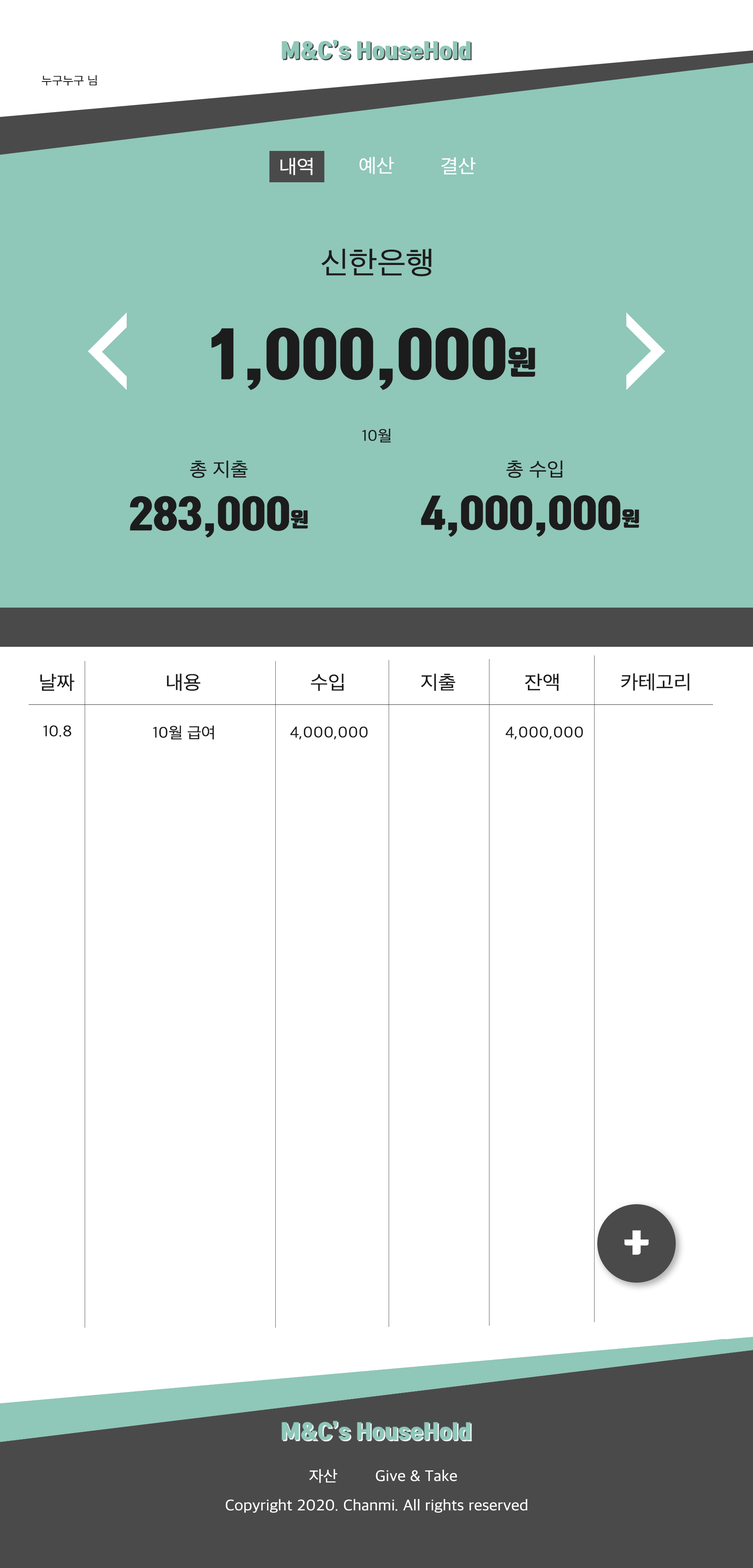
<style>
.page{position:relative;width:753px;height:1568px;background:#ffffff}
.page>*{position:absolute;margin:0}
.t1{font:11.8px "AppleSDGothicNeo-Regular";color:#1c1c1c;scale:1.05 1}
.t2{font:19.6px "AppleSDGothicNeo-Regular";color:#ffffff;scale:1.05 1}
.t3{font:31.4px "AppleSDGothicNeo-Regular";color:#1c1c1c;scale:1.05 1}
.t4{font:58.8px "TmonMonsoriOTFBlack";color:#1c1c1c;scale:1.05 1}
.t5{font:31.4px "TmonMonsoriOTFBlack";color:#1c1c1c;scale:1.05 1}
.t6{font:15.7px "AppleSDGothicNeo-Regular";color:#1c1c1c;scale:1.05 1}
.t7{font:19.6px "AppleSDGothicNeo-Regular";color:#1c1c1c;scale:1.05 1}
.t8{font:39.2px "TmonMonsoriOTFBlack";color:#1c1c1c;scale:1.05 1}
.t9{font:19.6px "TmonMonsoriOTFBlack";color:#1c1c1c;scale:1.05 1}
.t10{font:15.7px "AppleSDGothicNeo-Regular";color:#ffffff;scale:1.05 1}
</style>
<div class="page">
<p class="t1" style="left:42px;top:75px;width:55px;height:11px">누구누구 님</p>
<p class="t2" style="left:280px;top:158px;width:32px;height:17px">내역</p>
<p class="t2" style="left:359px;top:157px;width:35px;height:17px">예산</p>
<p class="t2" style="left:441px;top:157px;width:34px;height:17px">결산</p>
<p class="t3" style="left:321px;top:249px;width:110px;height:27px">신한은행</p>
<p class="t4" style="left:211px;top:328px;width:324px;height:62px">1,000,000<span class="t5">원</span></p>
<p class="t6" style="left:362px;top:428px;width:29px;height:15px">10월</p>
<p class="t7" style="left:190px;top:461px;width:57px;height:17px">총 지출</p>
<p class="t7" style="left:506px;top:460px;width:56px;height:18px">총 수입</p>
<p class="t8" style="left:130px;top:496px;width:178px;height:42px">283,000<span class="t9">원</span></p>
<p class="t8" style="left:421px;top:495px;width:218px;height:42px">4,000,000<span class="t9">원</span></p>
<p class="t7" style="left:40px;top:673px;width:34px;height:18px">날짜</p>
<p class="t7" style="left:167px;top:673px;width:33px;height:18px">내용</p>
<p class="t7" style="left:310px;top:673px;width:33px;height:18px">수입</p>
<p class="t7" style="left:421px;top:673px;width:34px;height:18px">지출</p>
<p class="t7" style="left:524px;top:673px;width:34px;height:18px">잔액</p>
<p class="t7" style="left:621px;top:673px;width:68px;height:18px">카테고리</p>
<p class="t6" style="left:43px;top:725px;width:28px;height:12px">10.８</p>
<p class="t6" style="left:153px;top:726px;width:61px;height:14px">10월 급여</p>
<p class="t6" style="left:290px;top:726px;width:78px;height:14px">4,000,000</p>
<p class="t6" style="left:505px;top:726px;width:78px;height:14px">4,000,000</p>
<p class="t10" style="left:309px;top:1469px;width:28px;height:14px">자산</p>
<p class="t10" style="left:376px;top:1470px;width:81px;height:11px">Give &amp; Take</p>
<p class="t10" style="left:225px;top:1499px;width:302px;height:14px">Copyright 2020. Chanmi. All rights reserved</p>
</div>
